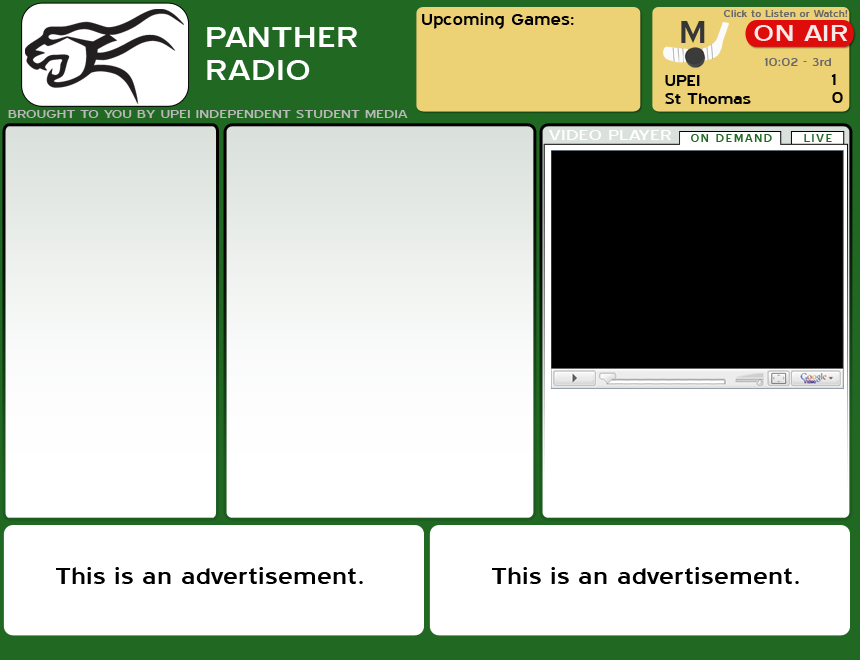
<style>
.page{position:relative;width:860px;height:660px;background:#ffffff}
.page>*{position:absolute;margin:0}
.t1{font:20px "BlueHighway";color:#000000;scale:1.29 1}
.t2{font:12px "BlueHighway";color:#6a6969;scale:1.29 1}
.t3{font:35.9px/33px "BlueHighway";color:#ffffff;text-transform:uppercase;scale:1.4 1}
.t4{font:39px "BlueHighway";color:#353636;scale:1.29 1}
.t5{font:29.4px "BlueHighway";color:#f8e9e9;text-transform:uppercase;scale:1.4 1}
.t6{font:15px "BlueHighway";color:#6a6969;scale:1.29 1}
.t7{font:19px/18px "BlueHighway";color:#000000;scale:1.29 1}
.t8{font:14.7px "BlueHighway";color:#b8b8b8;text-transform:uppercase;scale:1.4 1}
.t9{font:18.4px "BlueHighway";color:#ffffff;text-transform:uppercase;scale:1.4 1}
.t10{font:14px "BlueHighway";letter-spacing:0.08em;color:#216923;text-transform:uppercase;scale:1.24 1}
.t11{font:29px "BlueHighway";color:#000000;scale:1.29 1}
</style>
<div class="page">
<p class="t1" style="left:422px;top:13px;width:152px;height:16px">Upcoming Games:</p>
<p class="t2" style="left:723px;top:10px;width:125px;height:7px">Click to Listen or Watch!</p>
<p class="t3" style="left:207px;top:27px;width:150px;height:53px">Panther <br>Radio</p>
<p class="t4" style="left:681px;top:21px;width:24px;height:22px">M</p>
<p class="t5" style="left:754px;top:25px;width:94px;height:16px">On Air</p>
<p class="t6" style="left:764px;top:58px;width:67px;height:8px">10:02 - 3rd</p>
<p class="t7" style="left:665px;top:75px;width:86px;height:29px">UPEI<br>St Thomas</p>
<p class="t7" style="left:831px;top:74px;width:12px;height:29px">1<br>0</p>
<p class="t8" style="left:8px;top:110px;width:400px;height:8px">Brought to you by UPEI Independent Student Media</p>
<p class="t9" style="left:549px;top:130px;width:122px;height:10px">VIDEO Player</p>
<p class="t10" style="left:691px;top:134px;width:81px;height:8px">On Demand</p>
<p class="t10" style="left:804px;top:134px;width:28px;height:8px">Live</p>
<p class="t11" style="left:56px;top:567px;width:307px;height:17px">This is an advertisement.</p>
<p class="t11" style="left:492px;top:567px;width:307px;height:17px">This is an advertisement.</p>
</div>
